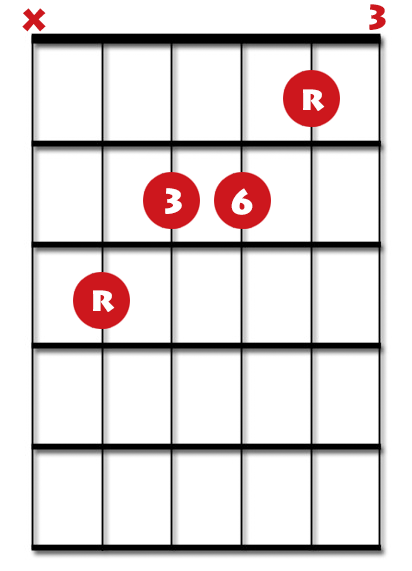
<style>
.page{position:relative;width:412px;height:571px;background:#ffffff}
.page>*{position:absolute;margin:0}
.t1{font:33.8px "LithosPro-Black";color:#cd171d}
.t2{font:33.8px "LithosPro-Black";color:#ffffff}
</style>
<div class="page">
<p class="t1" style="left:369px;top:4px;width:17px;height:26px">3</p>
<p class="t1" style="left:22px;top:8px;width:24px;height:24px">x</p>
<p class="t2" style="left:303px;top:89px;width:22px;height:22px">r</p>
<p class="t2" style="left:165px;top:188px;width:17px;height:26px">3</p>
<p class="t2" style="left:231px;top:188px;width:22px;height:27px">6</p>
<p class="t2" style="left:93px;top:290px;width:22px;height:22px">r</p>
</div>
